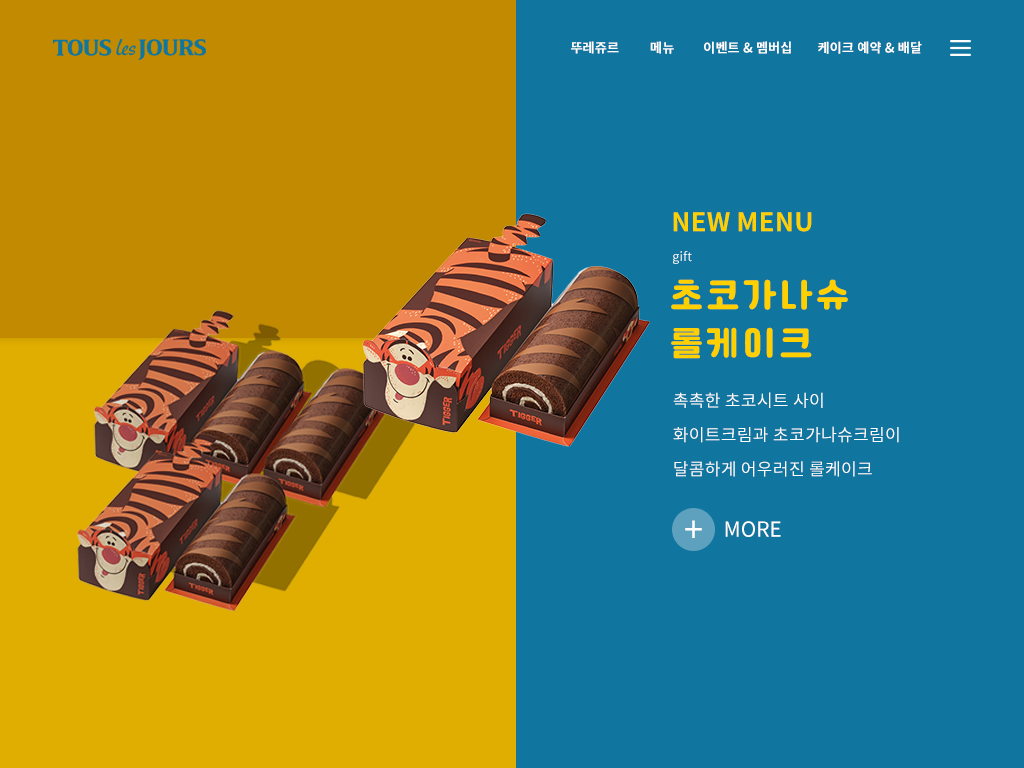
<style>
.page{position:relative;width:1024px;height:768px;background:#10759f}
.page>*{position:absolute;margin:0}
.t1{font:13.1px "NotoSansCJKkr-Bold";letter-spacing:0.01em;color:#fefefe}
.t2{font:25.7px "NotoSansCJKkr-Bold";letter-spacing:0.01em;color:#ffd000}
.t3{font:12.5px "NotoSansCJKkr-Regular";letter-spacing:0.01em;color:#ffffff}
.t4{font:34.8px/48px "Cafe24Ssurround";letter-spacing:0.1em;color:#ffd000}
.t5{font:17.1px/34.3px "NotoSansCJKkr-Regular";letter-spacing:0.015em;color:#ffffff}
.t6{font:34.8px "NotoSansCJKkr-Regular";color:#ffffff}
.t7{font:20.9px "NotoSansCJKkr-Regular";color:#ffffff}
</style>
<div class="page">
<p class="t1" style="left:571px;top:41px;width:48px;height:13px">뚜레쥬르</p>
<p class="t1" style="left:650px;top:41px;width:24px;height:13px">메뉴</p>
<p class="t1" style="left:704px;top:41px;width:87px;height:13px">이벤트 &amp; 멤버십</p>
<p class="t1" style="left:818px;top:41px;width:104px;height:13px">케이크 예약 &amp; 배달</p>
<p class="t2" style="left:673px;top:212px;width:139px;height:20px">NEW MENU</p>
<p class="t3" style="left:673px;top:251px;width:19px;height:13px">gift</p>
<p class="t4" style="left:671px;top:279px;width:177px;height:80px">초코가나슈<br>롤케이크</p>
<p class="t5" style="left:673px;top:392px;width:226px;height:85px">촉촉한 초코시트 사이<br>화이트크림과 초코가나슈크림이 <br>달콤하게 어우러진 롤케이크</p>
<p class="t6" style="left:685px;top:520px;width:17px;height:18px">+</p>
<p class="t7" style="left:725px;top:521px;width:56px;height:16px">MORE</p>
</div>
